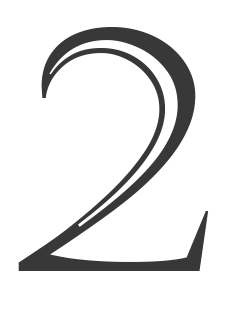
<style>
.page{position:relative;width:240px;height:320px;background:#ffffff}
.page>*{position:absolute;margin:0}
.t1{font:337.1px "Castellar";letter-spacing:-0.2em;color:#383838;scale:1.11 1}
</style>
<div class="page">
<p class="t1" style="left:18px;top:27px;width:191px;height:244px">2</p>
</div>
